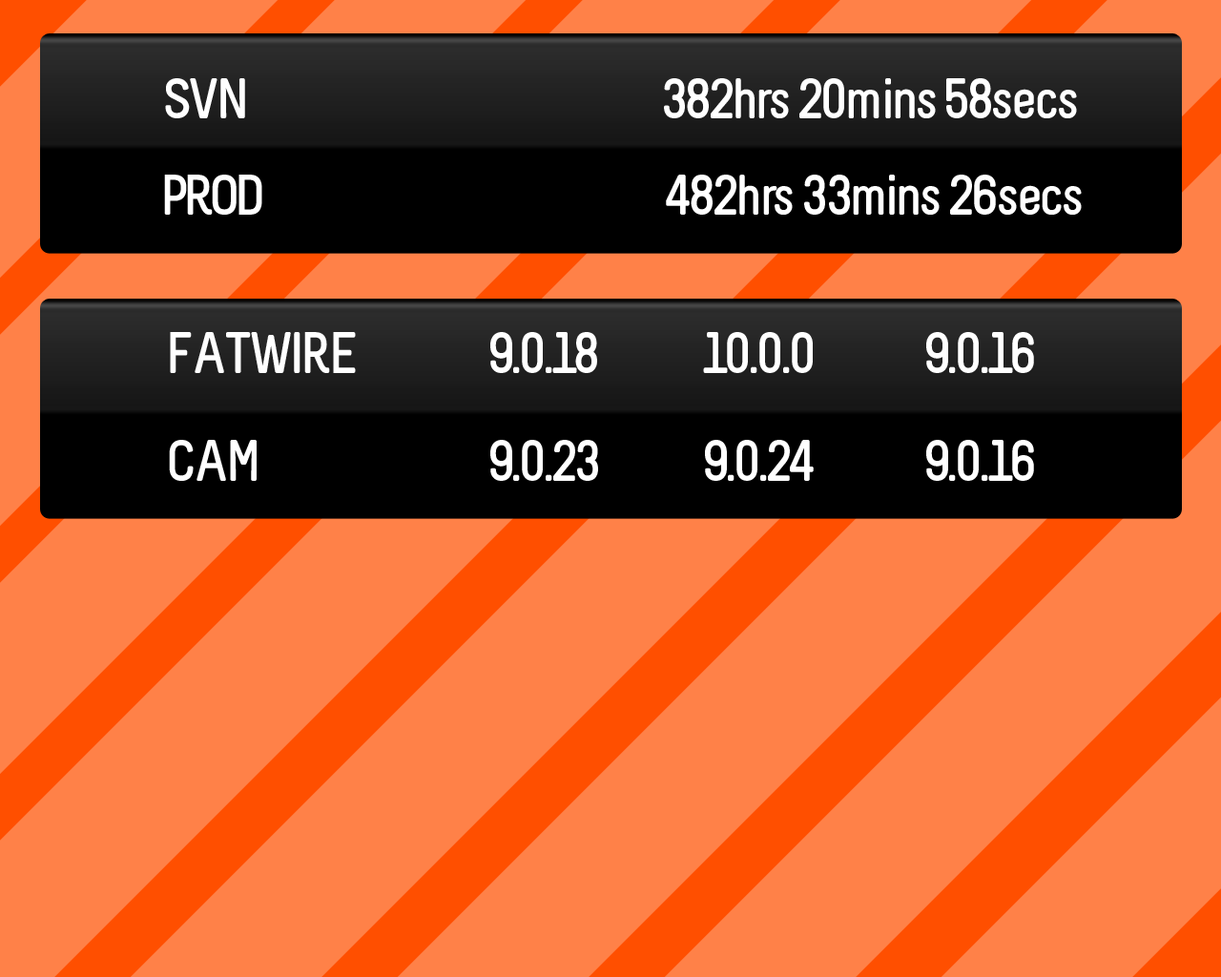
<style>
.page{position:relative;width:1221px;height:977px;background:#ff8148}
.page>*{position:absolute;margin:0}
.t1{font:57.2px "Melbourne-Bold";letter-spacing:-0.06em;color:#ffffff}
.t2{font:57.5px "Melbourne-Bold";letter-spacing:-0.06em;color:#ffffff}
</style>
<div class="page">
<p class="t1" style="left:165px;top:78px;width:80px;height:40px">SVN</p>
<p class="t1" style="left:664px;top:78px;width:413px;height:40px">382hrs 20mins 58secs</p>
<p class="t1" style="left:164px;top:175px;width:98px;height:40px">PROD</p>
<p class="t1" style="left:666px;top:175px;width:416px;height:40px">482hrs 33mins 26secs</p>
<p class="t2" style="left:170px;top:332px;width:186px;height:41px">FATWIRE</p>
<p class="t2" style="left:490px;top:332px;width:107px;height:41px">9.0.18</p>
<p class="t2" style="left:703px;top:332px;width:110px;height:41px">10.0.0</p>
<p class="t2" style="left:926px;top:332px;width:108px;height:41px">9.0.16</p>
<p class="t2" style="left:169px;top:440px;width:88px;height:41px">CAM</p>
<p class="t2" style="left:490px;top:440px;width:108px;height:41px">9.0.23</p>
<p class="t2" style="left:705px;top:440px;width:109px;height:41px">9.0.24</p>
<p class="t2" style="left:926px;top:440px;width:108px;height:41px">9.0.16</p>
</div>
